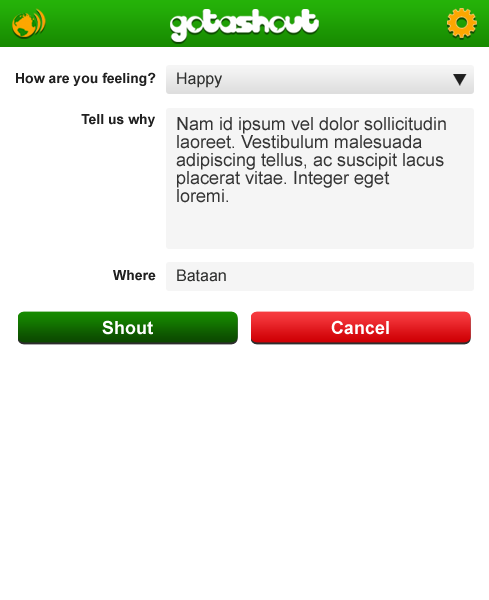
<style>
.page{position:relative;width:489px;height:600px;background:#ffffff}
.page>*{position:absolute;margin:0}
.t1{font:14px "Arial-BoldMT";color:#202020}
.t2{font:16px "ArialMT";color:#2f302f}
.t3{font:18px/18px "ArialMT";color:#353535}
.t4{font:18px "Arial-BoldMT";color:#ffffff}
</style>
<div class="page">
<p class="t1" style="left:16px;top:72px;width:140px;height:14px">How are you feeling?</p>
<p class="t2" style="left:177px;top:72px;width:45px;height:16px">Happy</p>
<p class="t1" style="left:81px;top:114px;width:74px;height:13px">Tell us why</p>
<p class="t3" style="left:176px;top:117px;width:270px;height:86px">Nam id ipsum vel dolor sollicitudin <br>laoreet. Vestibulum malesuada <br>adipiscing tellus, ac suscipit lacus <br>placerat vitae. Integer eget <br>loremi.</p>
<p class="t1" style="left:113px;top:270px;width:43px;height:11px">Where</p>
<p class="t2" style="left:177px;top:269px;width:49px;height:13px">Bataan</p>
<p class="t4" style="left:102px;top:320px;width:51px;height:15px">Shout</p>
<p class="t4" style="left:331px;top:320px;width:58px;height:15px">Cancel</p>
</div>
